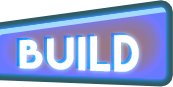
<style>
.page{position:relative;width:173px;height:87px;background:#ffffff}
.page>*{position:absolute;margin:0}
.t1{font:41.3px "LemonMilk";letter-spacing:0.05em;color:#ffffff}
</style>
<div class="page">
<p class="t1" style="left:19px;top:35px;width:120px;height:37px">Build</p>
<p class="t1" style="left:19px;top:35px;width:120px;height:37px">Build</p>
</div>
